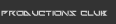
<style>
.page{position:relative;width:116px;height:24px;background:#333333}
.page>*{position:absolute;margin:0}
.t1{font:10px "TechnoHideo";color:#cdcdcd;text-transform:uppercase}
</style>
<div class="page">
<p class="t1" style="left:1px;top:10px;width:107px;height:6px">productions CLUB</p>
</div>
